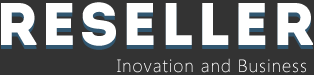
<style>
.page{position:relative;width:314px;height:75px;background:#333333}
.page>*{position:absolute;margin:0}
.t1{font:60px "Intro";letter-spacing:0.05em;color:#ffffff}
.t2{font:18px "SegoeUI-Light";letter-spacing:0.05em;color:#ffffff}
</style>
<div class="page">
<p class="t1" style="left:1px;top:2px;width:312px;height:44px">RESELLER</p>
<p class="t2" style="left:117px;top:58px;width:189px;height:15px">Inovation and Business</p>
</div>
